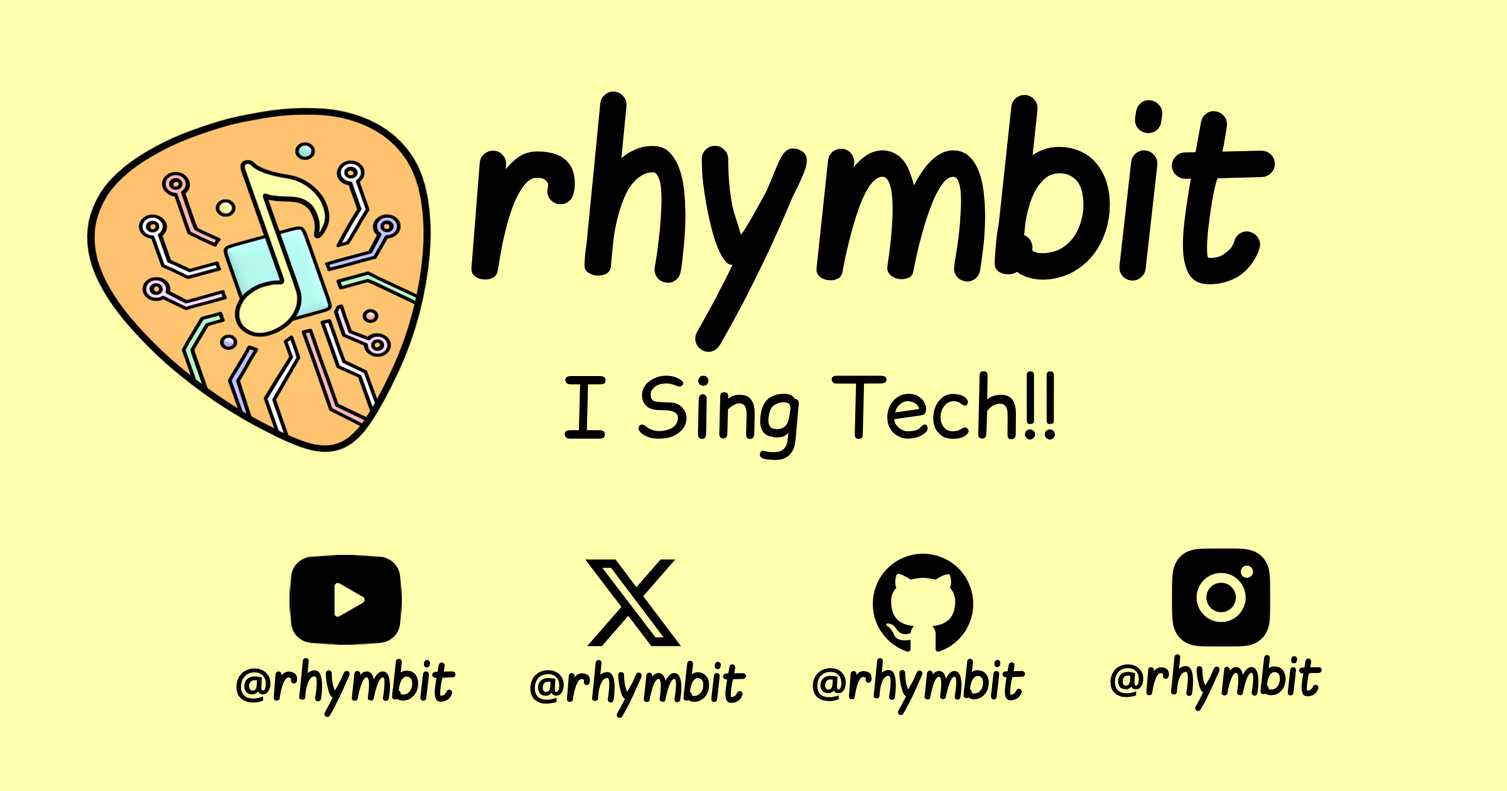
<style>
.page{position:relative;width:1507px;height:791px;background:#ffffad}
.page>*{position:absolute;margin:0}
.t1{font:188.4px "Blokletters-Viltstift";color:#000000}
.t2{font:83.5px "ComicRelief";color:#000000}
.t3{font:42.6px "Blokletters-Viltstift";color:#000000}
.t4{font:42.6px "NotoSans-Bold";color:#000000}
.t5{font:42px "Blokletters-Viltstift";color:#000000}
.t6{font:42px "NotoSans-Bold";color:#000000}
.t7{font:41.3px "Blokletters-Viltstift";color:#000000}
.t8{font:41.3px "NotoSans-Bold";color:#000000}
.t9{font:41.1px "Blokletters-Viltstift";color:#000000}
.t10{font:41.1px "NotoSans-Bold";color:#000000}
</style>
<div class="page">
<p class="t1" style="left:471px;top:91px;width:804px;height:261px">rhymbit</p>
<p class="t2" style="left:565px;top:371px;width:491px;height:91px">I Sing Tech!!</p>
<p class="t3" style="left:236px;top:658px;width:220px;height:59px"><span class="t4">@</span>rhymbit</p>
<p class="t5" style="left:530px;top:660px;width:216px;height:58px"><span class="t6">@</span>rhymbit</p>
<p class="t7" style="left:813px;top:658px;width:212px;height:57px"><span class="t8">@</span>rhymbit</p>
<p class="t9" style="left:1110px;top:654px;width:212px;height:57px"><span class="t10">@</span>rhymbit</p>
</div>
